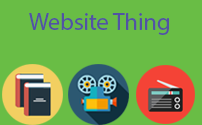
<style>
.page{position:relative;width:202px;height:125px;background:#69bd45}
.page>*{position:absolute;margin:0}
.t1{font:24px "MyriadPro-Regular";color:#5253a3}
</style>
<div class="page">
<p class="t1" style="left:29px;top:13px;width:140px;height:22px">Website Thing</p>
</div>
